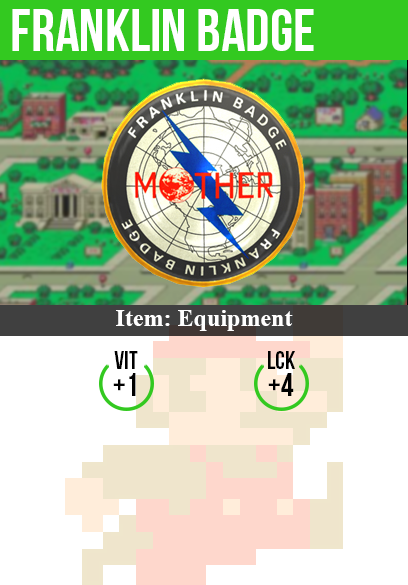
<style>
.page{position:relative;width:408px;height:585px;background:#ffffff}
.page>*{position:absolute;margin:0}
.t1{font:60px "BebasNeue";color:#ffffff}
.t2{font:24px "TimesNewRomanPS-BoldMT";color:#ffffff}
.t3{font:25px "BebasNeue";color:#000000}
.t4{font:32px "BebasNeue";color:#000000}
</style>
<div class="page">
<p class="t1" style="left:12px;top:9px;width:302px;height:42px">franklin badge</p>
<p class="t2" style="left:116px;top:310px;width:177px;height:21px">Item: Equipment</p>
<p class="t3" style="left:114px;top:351px;width:24px;height:18px">vit</p>
<p class="t3" style="left:268px;top:351px;width:27px;height:18px">lck</p>
<p class="t4" style="left:113px;top:373px;width:23px;height:23px">+1</p>
<p class="t4" style="left:268px;top:373px;width:26px;height:23px">+4</p>
</div>
